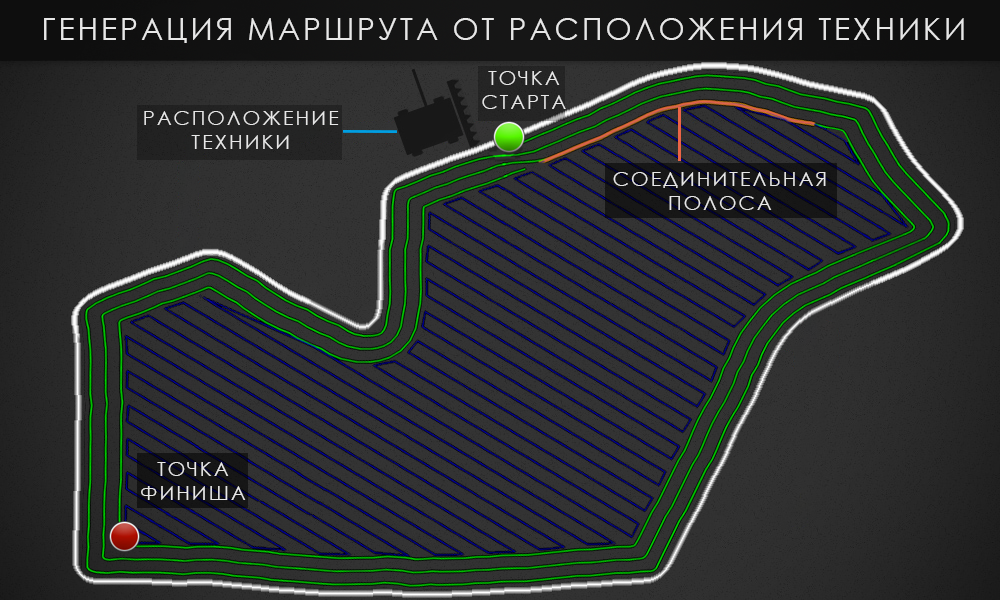
<style>
.page{position:relative;width:1000px;height:600px}
.page>*{position:absolute;margin:0}
.t1{font:30px "CenturyGothic";letter-spacing:0.1em;color:#e7e7e7}
.t2{font:20px "CenturyGothic";letter-spacing:0.1em;color:#e7e7e7}
</style>
<div class="page">
<p class="t1" style="left:44px;top:18px;width:920px;height:25px">ГЕНЕРАЦИЯ МАРШРУТА ОТ РАСПОЛОЖЕНИЯ ТЕХНИКИ</p>
<p class="t2" style="left:482px;top:71px;width:84px;height:38px;text-align:center">ТОЧКА<br>СТАРТА</p>
<p class="t2" style="left:144px;top:111px;width:195px;height:38px;text-align:center">РАСПОЛОЖЕНИЕ<br>ТЕХНИКИ</p>
<p class="t2" style="left:613px;top:172px;width:213px;height:38px;text-align:center">СОЕДИНИТЕЛЬНАЯ<br>ПОЛОСА</p>
<p class="t2" style="left:141px;top:462px;width:105px;height:38px;text-align:center">ТОЧКА<br>ФИНИША</p>
</div>
